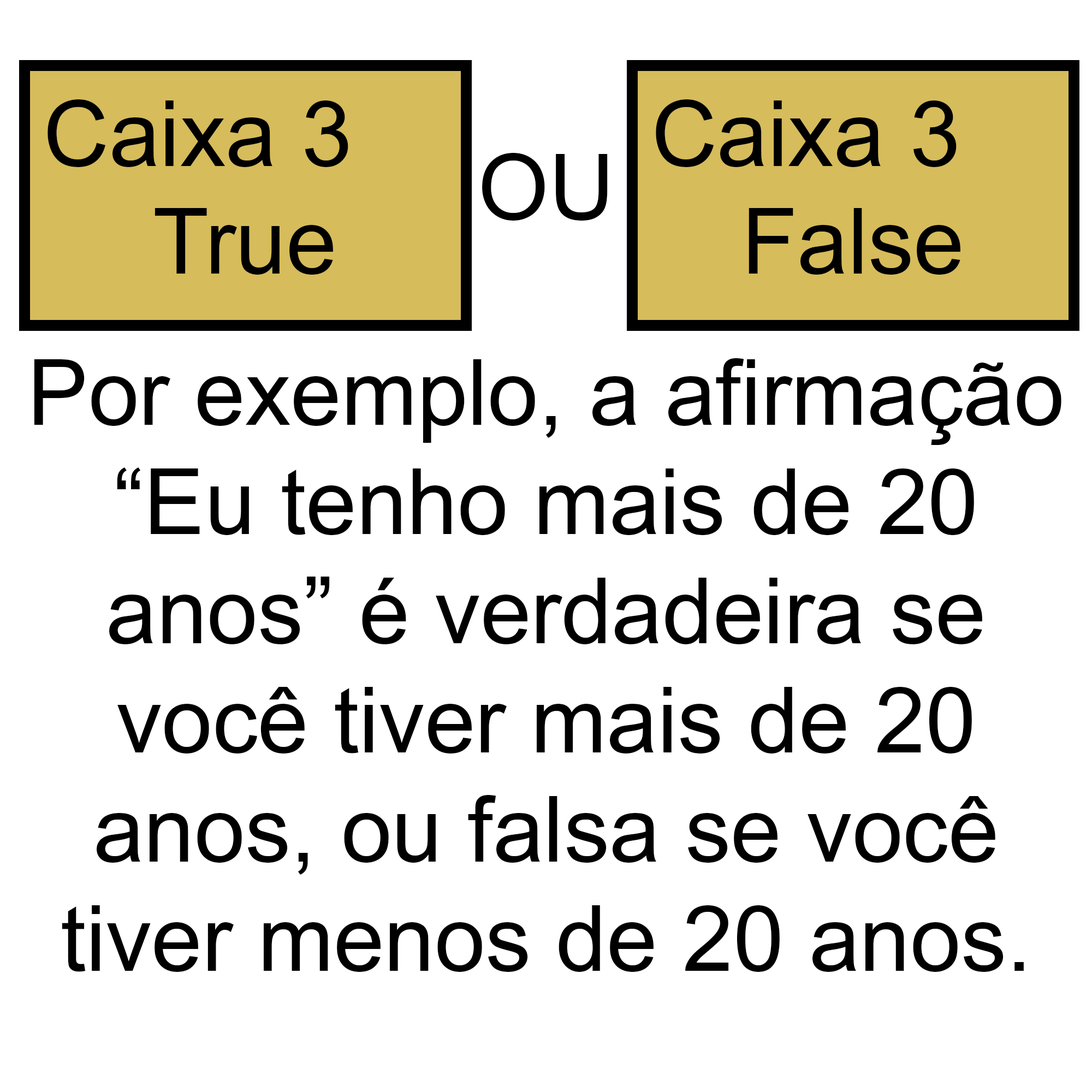
<style>
.page{position:relative;width:1092px;height:1092px;background:#ffffff}
.page>*{position:absolute;margin:0}
.t1{font:91px "ArialMT";color:#000000}
</style>
<div class="page">
<p class="t1" style="left:48px;top:99px;width:300px;height:68px">Caixa 3</p>
<p class="t1" style="left:656px;top:99px;width:301px;height:68px">Caixa 3</p>
<p class="t1" style="left:482px;top:153px;width:126px;height:68px">OU</p>
<p class="t1" style="left:155px;top:208px;width:178px;height:67px">True</p>
<p class="t1" style="left:749px;top:208px;width:211px;height:67px">False</p>
<p class="t1" style="left:34px;top:358px;width:1027px;height:614px;text-align:center">Por exemplo, a afirmação<br>“Eu tenho mais de 20<br>anos” é verdadeira se<br>você tiver mais de 20<br>anos, ou falsa se você<br>tiver menos de 20 anos.</p>
</div>
